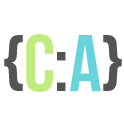
<style>
.page{position:relative;width:124px;height:124px;background:#ffffff}
.page>*{position:absolute;margin:0}
.t1{font:80px "BebasNeue";color:#545454}
.t2{font:80px "BebasNeue";color:#c0eb7d}
.t3{font:80px "BebasNeue";color:#67d3da}
</style>
<div class="page">
<p class="t1" style="left:4px;top:34px;width:118px;height:58px">{<span class="t2">C</span>:<span class="t3">A</span>}</p>
</div>
